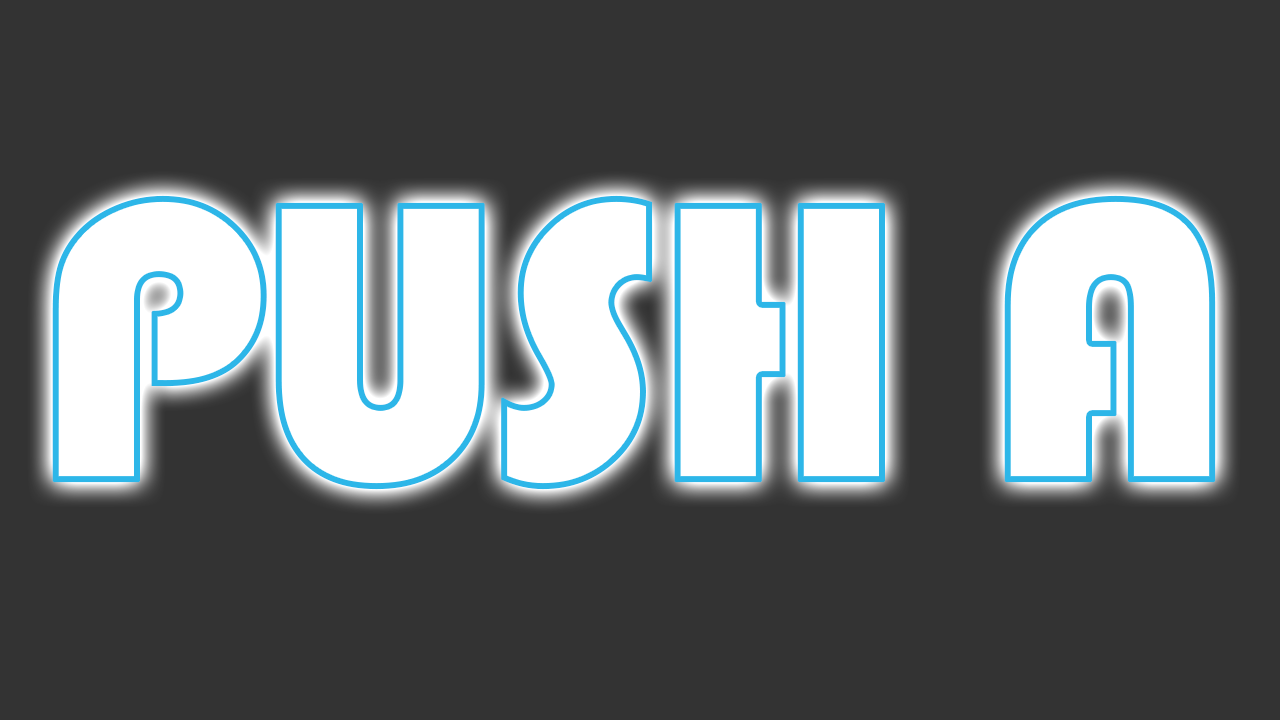
<style>
.page{position:relative;width:1280px;height:720px;background:#333333}
.page>*{position:absolute;margin:0}
.t1{font:99.8px "Bauhaus93";letter-spacing:-0.07em;color:#ffffff;font-weight:bold;scale:1.03 1}
</style>
<div class="page">
<p class="t1" style="left:52px;top:195px;width:1164px;height:295px;text-align:center">PUSH A</p>
</div>
